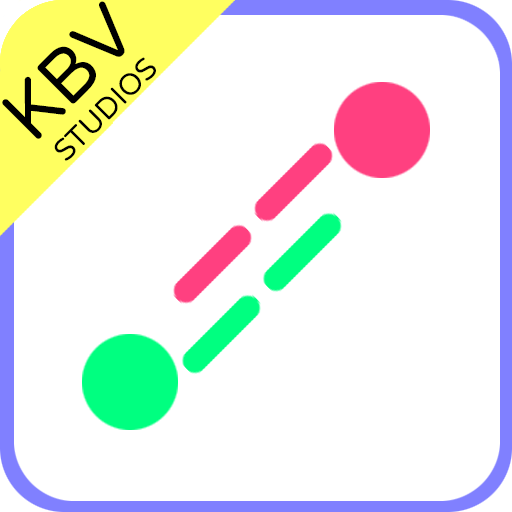
<style>
.page{position:relative;width:512px;height:512px;background:#ffffff}
.page>*{position:absolute;margin:0}
.t1{font:30px "VarelaRound";color:#000000}
.t2{font:75px "VarelaRound";color:#000000}
</style>
<div class="page">
<p class="t1" style="left:2px;top:1px;width:154px;height:160px;text-align:center;rotate:-45deg"><span class="t2">KBV<br></span>STUDIOS</p>
</div>
